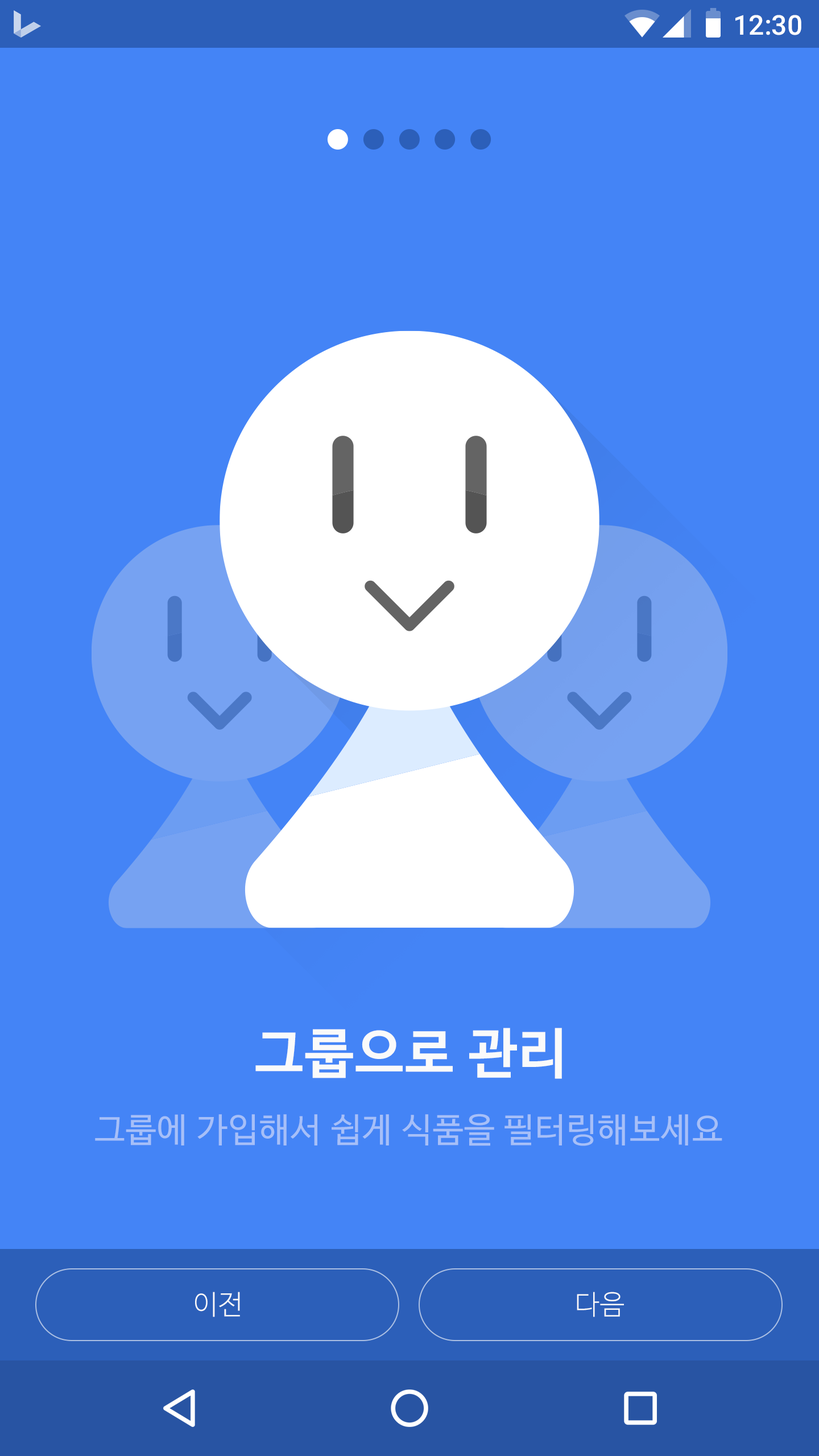
<style>
.page{position:relative;width:819px;height:1456px;background:#4484f6}
.page>*{position:absolute;margin:0}
.t1{font:27.3px "Roboto-Medium";color:#ffffff}
.t2{font:54.6px "NanumBarunGothicBold";letter-spacing:0.025em;color:#fafafa}
.t3{font:34.1px "NanumBarunGothic";letter-spacing:0.025em;color:#a6bff8}
.t4{font:27.3px "NanumBarunGothicLight";letter-spacing:0.025em;color:#fafafa}
</style>
<div class="page">
<p class="t1" style="left:735px;top:15px;width:66px;height:20px">12:30</p>
<p class="t2" style="left:255px;top:1028px;width:307px;height:51px">그룹으로 관리</p>
<p class="t3" style="left:95px;top:1114px;width:627px;height:32px">그룹에 가입해서 쉽게 식품을 필터링해보세요</p>
<p class="t4" style="left:195px;top:1292px;width:45px;height:25px">이전</p>
<p class="t4" style="left:577px;top:1292px;width:47px;height:25px">다음</p>
</div>
